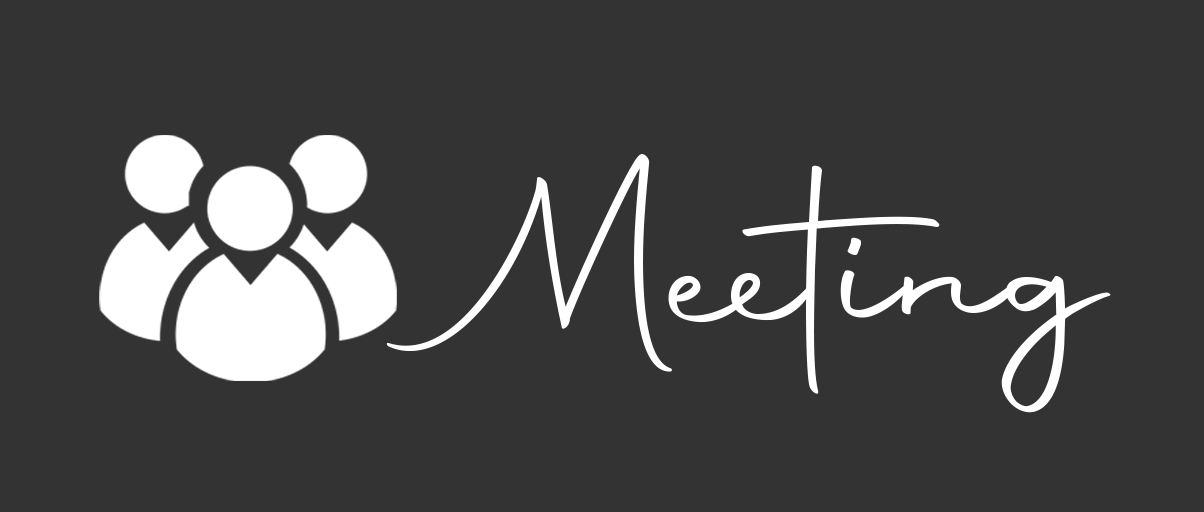
<style>
.page{position:relative;width:1204px;height:512px;background:#333333}
.page>*{position:absolute;margin:0}
.t1{font:245.2px "Autography";color:#ffffff}
</style>
<div class="page">
<p class="t1" style="left:386px;top:154px;width:725px;height:259px">Meeting</p>
</div>
